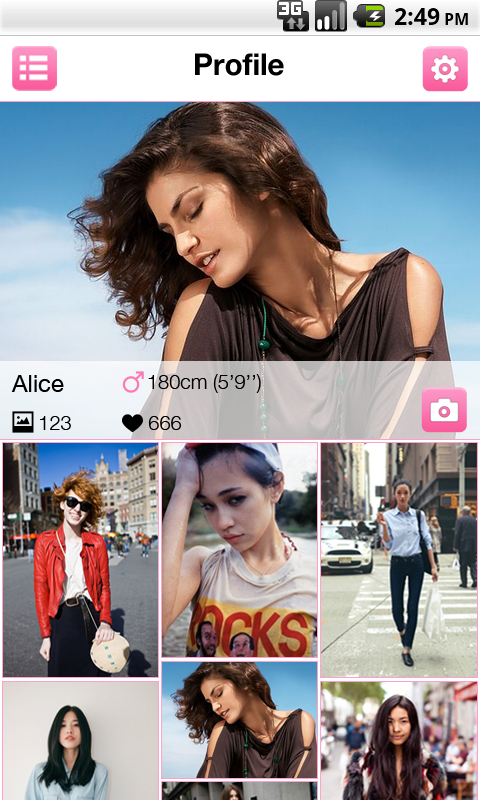
<style>
.page{position:relative;width:480px;height:800px}
.page>*{position:absolute;margin:0}
.t1{font:30px "HelveticaNeue-Bold";color:#000000}
.t2{font:24px "HelveticaNeue";color:#000000}
.t3{font:20px "HelveticaNeue-Light";color:#000000}
</style>
<div class="page">
<p class="t1" style="left:195px;top:53px;width:89px;height:23px">Profile</p>
<p class="t2" style="left:11px;top:375px;width:53px;height:17px">Alice</p>
<p class="t3" style="left:148px;top:374px;width:113px;height:19px">180cm (5’9’’)</p>
<p class="t3" style="left:40px;top:416px;width:31px;height:14px">123</p>
<p class="t3" style="left:148px;top:416px;width:34px;height:14px">666</p>
</div>
